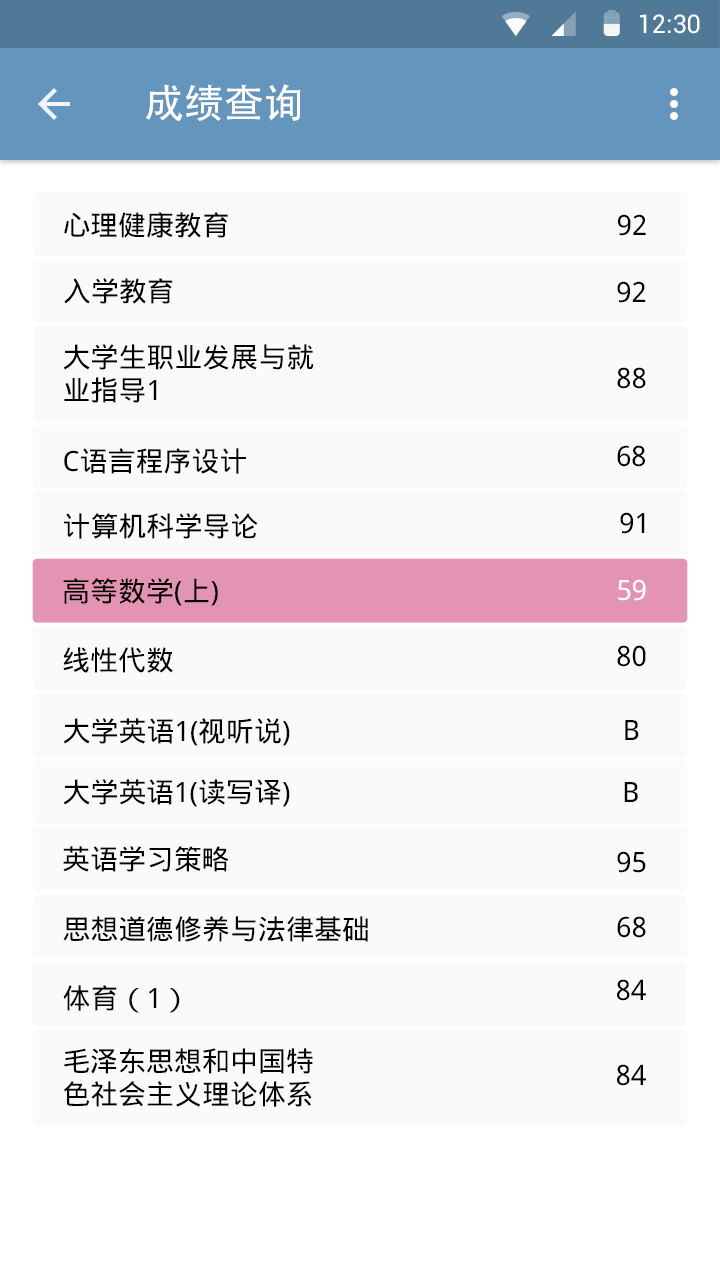
<style>
.page{position:relative;width:720px;height:1280px;background:#fbfaf8}
.page>*{position:absolute;margin:0}
.t1{font:25.4px "Roboto-Regular";color:#ffffff}
.t2{font:40px "AdobeHeitiStd-Regular";color:#ffffff}
.t3{font:28px "DroidSansFallback";color:#000000}
.t4{font:28px "DroidSansFallback";color:#ffffff}
</style>
<div class="page">
<p class="t1" style="left:640px;top:14px;width:60px;height:20px">12:30</p>
<p class="t2" style="left:145px;top:84px;width:156px;height:37px">成绩查询</p>
<p class="t3" style="left:64px;top:212px;width:164px;height:26px">心理健康教育</p>
<p class="t3" style="left:618px;top:214px;width:28px;height:22px">92</p>
<p class="t3" style="left:64px;top:278px;width:109px;height:26px">入学教育</p>
<p class="t3" style="left:617px;top:281px;width:29px;height:22px">92</p>
<p class="t3" style="left:63px;top:344px;width:251px;height:59px">大学生职业发展与就<br>业指导1</p>
<p class="t3" style="left:617px;top:367px;width:29px;height:22px">88</p>
<p class="t3" style="left:64px;top:448px;width:182px;height:26px">C语言程序设计</p>
<p class="t3" style="left:617px;top:445px;width:28px;height:22px">68</p>
<p class="t3" style="left:64px;top:513px;width:194px;height:26px">计算机科学导论</p>
<p class="t3" style="left:620px;top:512px;width:25px;height:22px">91</p>
<p class="t3" style="left:63px;top:578px;width:155px;height:28px">高等数学(上)</p>
<p class="t4" style="left:618px;top:579px;width:28px;height:22px">59</p>
<p class="t3" style="left:63px;top:647px;width:110px;height:26px">线性代数</p>
<p class="t3" style="left:617px;top:645px;width:29px;height:22px">80</p>
<p class="t3" style="left:63px;top:718px;width:227px;height:28px">大学英语1(视听说)</p>
<p class="t3" style="left:625px;top:720px;width:14px;height:20px">B</p>
<p class="t3" style="left:63px;top:779px;width:227px;height:28px">大学英语1(读写译)</p>
<p class="t3" style="left:624px;top:782px;width:14px;height:20px">B</p>
<p class="t3" style="left:63px;top:846px;width:166px;height:26px">英语学习策略</p>
<p class="t3" style="left:617px;top:851px;width:29px;height:22px">95</p>
<p class="t3" style="left:63px;top:916px;width:305px;height:26px">思想道德修养与法律基础</p>
<p class="t3" style="left:617px;top:916px;width:29px;height:22px">68</p>
<p class="t3" style="left:63px;top:985px;width:117px;height:28px">体育（1）</p>
<p class="t3" style="left:617px;top:979px;width:29px;height:22px">84</p>
<p class="t3" style="left:64px;top:1048px;width:249px;height:59px">毛泽东思想和中国特<br>色社会主义理论体系</p>
<p class="t3" style="left:617px;top:1064px;width:29px;height:22px">84</p>
</div>
